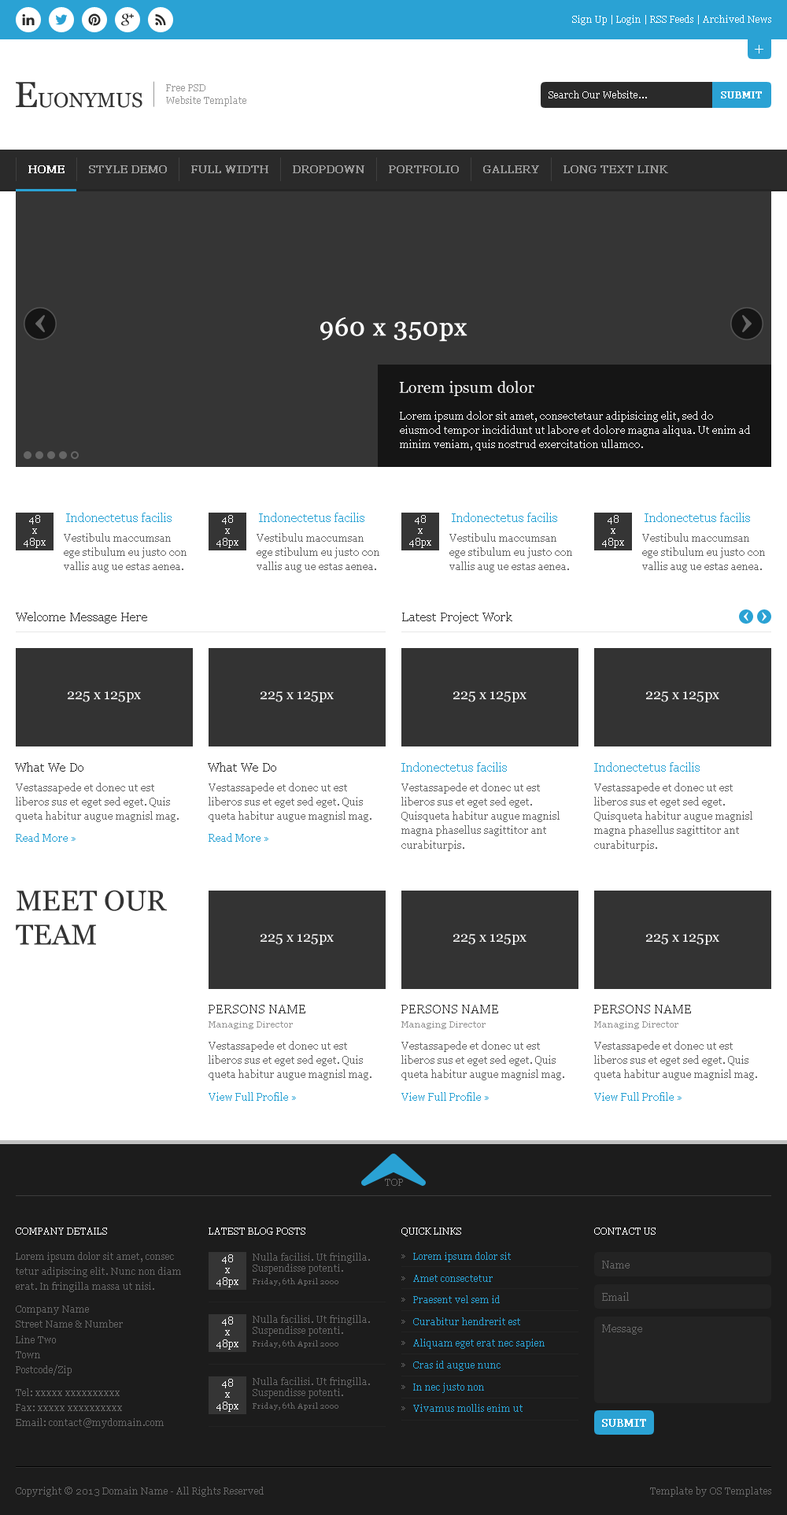
<style>
.page{position:relative;width:787px;height:1515px;background:#ffffff}
.page>*{position:absolute;margin:0}
.t1{font:9.4px "Georgia";color:#ffffff}
.t2{font:20.5px "Georgia";color:#333333}
.t3{font:36.2px "Georgia";color:#333333}
.t4{font:9.4px/12.3px "Georgia";color:#999999}
.t5{font:9.4px "Georgia";color:#ffffff;font-weight:bold}
.t6{font:11px "Georgia";color:#ffffff;font-weight:bold}
.t7{font:11px "Georgia";color:#999999;font-weight:bold}
.t8{font:25.2px "Georgia";color:#ffffff;font-weight:bold}
.t9{font:15.7px "Georgia";color:#ffffff}
.t10{font:10.2px/14.3px "Georgia";color:#ffffff}
.t11{font:9.4px/11.3px "Georgia";color:#ffffff}
.t12{font:12.6px "Georgia";color:#2aa2d4}
.t13{font:10.2px/14.3px "Georgia";color:#666666}
.t14{font:12.6px "Georgia";color:#333333}
.t15{font:14.2px "Georgia";color:#ffffff}
.t16{font:10.2px "Georgia";color:#2aa2d4}
.t17{font:28.3px/34px "Georgia";color:#333333}
.t18{font:8.7px "Georgia";color:#979797}
.t19{font:9.4px "Georgia";color:#666666}
.t20{font:9.4px/15.1px "Georgia";color:#666666}
.t21{font:9.4px/11.3px "Georgia";color:#666666}
.t22{font:9.4px/21.7px "Georgia";color:#2aa2d4}
.t23{font:9.4px/21.7px "Georgia";color:#666666}
.t24{font:10.2px "Georgia";color:#666666}
.t25{font:7.9px "Georgia";color:#666666}
.t26{font:10.2px "Georgia";color:#ffffff;font-weight:bold}
</style>
<div class="page">
<p class="t1" style="left:572px;top:15px;width:200px;height:10px">Sign Up | Login | RSS Feeds | Archived News</p>
<p class="t2" style="left:16px;top:82px;width:126px;height:26px"><span class="t3">E</span>UONYMUS</p>
<p class="t4" style="left:166px;top:84px;width:80px;height:22px">Free PSD<br>Website Template</p>
<p class="t1" style="left:549px;top:91px;width:98px;height:7px">Search Our Website...</p>
<p class="t5" style="left:721px;top:91px;width:41px;height:7px">SUBMIT</p>
<p class="t6" style="left:28px;top:165px;width:37px;height:8px">HOME</p>
<p class="t7" style="left:89px;top:165px;width:78px;height:8px">STYLE DEMO</p>
<p class="t7" style="left:191px;top:165px;width:77px;height:8px">FULL WIDTH</p>
<p class="t7" style="left:293px;top:165px;width:71px;height:8px">DROPDOWN</p>
<p class="t7" style="left:389px;top:165px;width:70px;height:8px">PORTFOLIO</p>
<p class="t7" style="left:483px;top:165px;width:56px;height:8px">GALLERY</p>
<p class="t7" style="left:564px;top:165px;width:104px;height:8px">LONG TEXT LINK</p>
<p class="t8" style="left:320px;top:317px;width:148px;height:25px">960 x 350px</p>
<p class="t9" style="left:399px;top:380px;width:136px;height:16px">Lorem ipsum dolor</p>
<p class="t10" style="left:400px;top:411px;width:350px;height:39px">Lorem ipsum dolor sit amet, consectetaur adipisicing elit, sed do eiusmod tempor incididunt ut labore et dolore magna aliqua. Ut enim ad minim veniam, quis nostrud exercitation ullamco.</p>
<p class="t11" style="left:24px;top:515px;width:22px;height:33px;text-align:center">48<br>x<br>48px</p>
<p class="t12" style="left:66px;top:513px;width:106px;height:9px">Indonectetus facilis</p>
<p class="t11" style="left:216px;top:515px;width:23px;height:33px;text-align:center">48<br>x<br>48px</p>
<p class="t12" style="left:259px;top:513px;width:105px;height:9px">Indonectetus facilis</p>
<p class="t11" style="left:409px;top:515px;width:22px;height:33px;text-align:center">48<br>x<br>48px</p>
<p class="t12" style="left:452px;top:513px;width:105px;height:9px">Indonectetus facilis</p>
<p class="t11" style="left:602px;top:515px;width:22px;height:33px;text-align:center">48<br>x<br>48px</p>
<p class="t12" style="left:645px;top:513px;width:105px;height:9px">Indonectetus facilis</p>
<p class="t13" style="left:64px;top:533px;width:123px;height:39px">Vestibulu maccumsan ege stibulum eu justo con vallis aug ue estas aenea.</p>
<p class="t13" style="left:257px;top:533px;width:122px;height:39px">Vestibulu maccumsan ege stibulum eu justo con vallis aug ue estas aenea.</p>
<p class="t13" style="left:450px;top:533px;width:122px;height:39px">Vestibulu maccumsan ege stibulum eu justo con vallis aug ue estas aenea.</p>
<p class="t13" style="left:642px;top:533px;width:123px;height:39px">Vestibulu maccumsan ege stibulum eu justo con vallis aug ue estas aenea.</p>
<p class="t14" style="left:16px;top:612px;width:131px;height:12px">Welcome Message Here</p>
<p class="t14" style="left:402px;top:612px;width:111px;height:12px">Latest Project Work</p>
<p class="t15" style="left:68px;top:691px;width:73px;height:11px">225 x 125px</p>
<p class="t15" style="left:261px;top:691px;width:73px;height:11px">225 x 125px</p>
<p class="t15" style="left:453px;top:691px;width:74px;height:11px">225 x 125px</p>
<p class="t15" style="left:646px;top:691px;width:74px;height:11px">225 x 125px</p>
<p class="t14" style="left:15px;top:762px;width:68px;height:10px">What We Do</p>
<p class="t14" style="left:208px;top:762px;width:68px;height:10px">What We Do</p>
<p class="t12" style="left:401px;top:762px;width:106px;height:10px">Indonectetus facilis</p>
<p class="t12" style="left:594px;top:762px;width:106px;height:10px">Indonectetus facilis</p>
<p class="t13" style="left:16px;top:783px;width:163px;height:39px">Vestassapede et donec ut est liberos sus et eget sed eget. Quis queta habitur augue magnisl mag.</p>
<p class="t13" style="left:209px;top:783px;width:163px;height:39px">Vestassapede et donec ut est liberos sus et eget sed eget. Quis queta habitur augue magnisl mag.</p>
<p class="t13" style="left:401px;top:783px;width:159px;height:68px">Vestassapede et donec ut est liberos sus et eget sed eget. Quisqueta habitur augue magnisl magna phasellus sagittitor ant curabiturpis.</p>
<p class="t13" style="left:594px;top:783px;width:159px;height:68px">Vestassapede et donec ut est liberos sus et eget sed eget. Quisqueta habitur augue magnisl magna phasellus sagittitor ant curabiturpis.</p>
<p class="t16" style="left:16px;top:833px;width:60px;height:9px">Read More »</p>
<p class="t16" style="left:209px;top:833px;width:59px;height:9px">Read More »</p>
<p class="t17" style="left:16px;top:890px;width:151px;height:55px">MEET OUR TEAM</p>
<p class="t15" style="left:261px;top:934px;width:73px;height:11px">225 x 125px</p>
<p class="t15" style="left:453px;top:934px;width:74px;height:11px">225 x 125px</p>
<p class="t15" style="left:646px;top:934px;width:74px;height:11px">225 x 125px</p>
<p class="t14" style="left:209px;top:1005px;width:96px;height:8px">PERSONS NAME</p>
<p class="t14" style="left:401px;top:1005px;width:97px;height:8px">PERSONS NAME</p>
<p class="t14" style="left:594px;top:1005px;width:97px;height:8px">PERSONS NAME</p>
<p class="t18" style="left:209px;top:1021px;width:84px;height:8px">Managing Director</p>
<p class="t18" style="left:401px;top:1021px;width:85px;height:8px">Managing Director</p>
<p class="t18" style="left:594px;top:1021px;width:85px;height:8px">Managing Director</p>
<p class="t13" style="left:209px;top:1041px;width:163px;height:39px">Vestassapede et donec ut est liberos sus et eget sed eget. Quis queta habitur augue magnisl mag.</p>
<p class="t13" style="left:401px;top:1041px;width:163px;height:39px">Vestassapede et donec ut est liberos sus et eget sed eget. Quis queta habitur augue magnisl mag.</p>
<p class="t13" style="left:594px;top:1041px;width:163px;height:39px">Vestassapede et donec ut est liberos sus et eget sed eget. Quis queta habitur augue magnisl mag.</p>
<p class="t16" style="left:209px;top:1092px;width:87px;height:9px">View Full Profile »</p>
<p class="t16" style="left:401px;top:1092px;width:88px;height:9px">View Full Profile »</p>
<p class="t16" style="left:594px;top:1092px;width:88px;height:9px">View Full Profile »</p>
<p class="t19" style="left:385px;top:1179px;width:18px;height:7px">TOP</p>
<p class="t1" style="left:16px;top:1227px;width:91px;height:7px">COMPANY DETAILS</p>
<p class="t1" style="left:209px;top:1227px;width:96px;height:7px">LATEST BLOG POSTS</p>
<p class="t1" style="left:401px;top:1227px;width:60px;height:9px">QUICK LINKS</p>
<p class="t1" style="left:594px;top:1227px;width:62px;height:7px">CONTACT US</p>
<p class="t20" style="left:16px;top:1252px;width:165px;height:176px">Lorem ipsum dolor sit amet, consec <br>tetur adipiscing elit. Nunc non diam <br>erat. In fringilla massa ut nisi.<br><span class="t21"><br>Company Name<br></span>Street Name &amp; Number<br>Line Two<br>Town<br>Postcode/Zip<br><span class="t21"><br>Tel: xxxxx xxxxxxxxxx<br></span>Fax: xxxxx xxxxxxxxxx<br>Email: contact@mydomain.com</p>
<p class="t21" style="left:253px;top:1253px;width:117px;height:21px">Nulla facilisi. Ut fringilla. <br>Suspendisse potenti.</p>
<p class="t22" style="left:413px;top:1252px;width:132px;height:160px">Lorem ipsum dolor sit<br>Amet consectetur<br>Praesent vel sem id<br>Curabitur hendrerit est<br>Aliquam eget erat nec sapien<br>Cras id augue nunc<br>In nec justo non<br>Vivamus mollis enim ut</p>
<p class="t11" style="left:216px;top:1254px;width:23px;height:33px;text-align:center">48<br>x<br>48px</p>
<p class="t23" style="left:401px;top:1254px;width:4px;height:156px">»<br>»<br>»<br>»<br>»<br>»<br>»<br>»</p>
<p class="t24" style="left:602px;top:1260px;width:28px;height:8px">Name</p>
<p class="t25" style="left:253px;top:1278px;width:86px;height:8px">Friday, 6th April 2000</p>
<p class="t24" style="left:602px;top:1292px;width:27px;height:9px">Email</p>
<p class="t11" style="left:216px;top:1316px;width:23px;height:33px;text-align:center">48<br>x<br>48px</p>
<p class="t21" style="left:253px;top:1315px;width:117px;height:21px">Nulla facilisi. Ut fringilla. <br>Suspendisse potenti.</p>
<p class="t24" style="left:602px;top:1324px;width:40px;height:10px">Message</p>
<p class="t25" style="left:253px;top:1340px;width:86px;height:8px">Friday, 6th April 2000</p>
<p class="t11" style="left:216px;top:1378px;width:23px;height:34px;text-align:center">48<br>x<br>48px</p>
<p class="t21" style="left:253px;top:1377px;width:117px;height:21px">Nulla facilisi. Ut fringilla. <br>Suspendisse potenti.</p>
<p class="t25" style="left:253px;top:1402px;width:86px;height:8px">Friday, 6th April 2000</p>
<p class="t26" style="left:602px;top:1419px;width:44px;height:8px">SUBMIT</p>
<p class="t19" style="left:16px;top:1486px;width:248px;height:11px">Copyright © 2013 Domain Name - All Rights Reserved</p>
<p class="t19" style="left:650px;top:1486px;width:122px;height:11px">Template by OS Templates</p>
</div>
